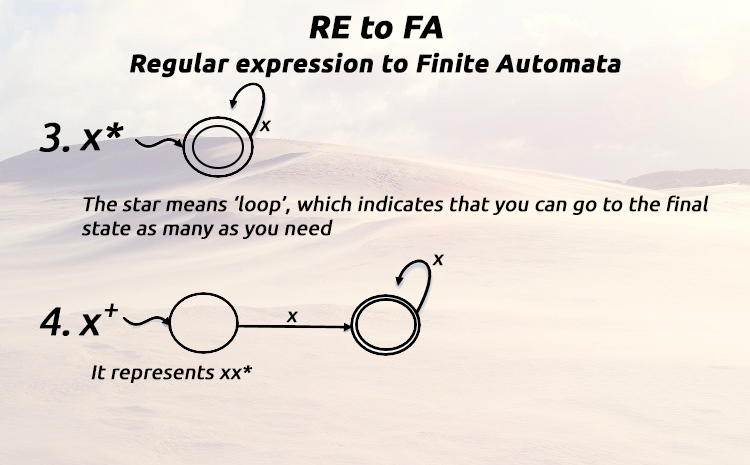
<style>
.page{position:relative;width:750px;height:465px}
.page>*{position:absolute;margin:0}
.t1{font:32px "Ubuntu-Bold";color:#000000;font-weight:bold;font-style:italic}
.t2{font:25.3px "Ubuntu-Bold";color:#000000;font-weight:bold;font-style:italic}
.t3{font:40px "Ubuntu";color:#000000;font-weight:bold;font-style:italic}
.t4{font:20px "Ubuntu";color:#000000;font-weight:bold;font-style:italic}
.t5{font:26.7px "Ubuntu";color:#000000;font-weight:bold;font-style:italic}
</style>
<div class="page">
<p class="t1" style="left:309px;top:15px;width:134px;height:24px">RE to FA</p>
<p class="t2" style="left:130px;top:52px;width:491px;height:26px">Regular expression to Finite Automata</p>
<p class="t3" style="left:39px;top:122px;width:31px;height:30px">3.</p>
<p class="t3" style="left:79px;top:122px;width:45px;height:29px">x*</p>
<p class="t4" style="left:259px;top:120px;width:12px;height:12px">x</p>
<p class="t4" style="left:81px;top:195px;width:628px;height:44px">The star means ‘loop’, which indicates that you can go to the final state as many as you need</p>
<p class="t4" style="left:432px;top:254px;width:12px;height:12px">x</p>
<p class="t5" style="left:104px;top:303px;width:14px;height:14px">+</p>
<p class="t3" style="left:39px;top:307px;width:31px;height:29px">4.</p>
<p class="t3" style="left:78px;top:314px;width:24px;height:22px">x</p>
<p class="t4" style="left:286px;top:311px;width:12px;height:12px">x</p>
<p class="t4" style="left:91px;top:365px;width:162px;height:18px">It represents xx*</p>
</div>
